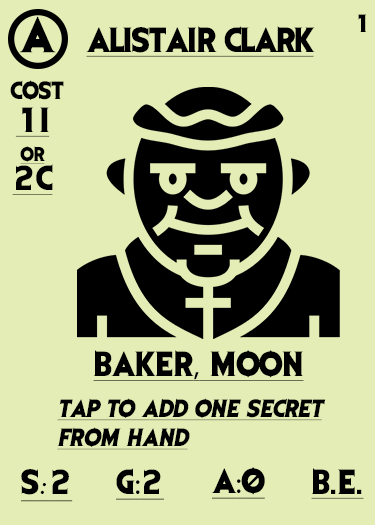
<style>
.page{position:relative;width:375px;height:525px;background:#e3edb5}
.page>*{position:absolute;margin:0}
.t1{font:41.7px "EvilDead";letter-spacing:-0.05em;color:#000000}
.t2{font:20.8px "EvilDead";color:#000000}
.t3{font:29.2px "EvilDead";letter-spacing:-0.025em;color:#000000;text-decoration:underline}
.t4{font:29.2px/29.2px "EvilDead";color:#000000;text-decoration:underline}
.t5{font:16.7px/29.2px "EvilDead";color:#000000;text-decoration:underline}
.t6{font:29.2px "EvilDead";color:#000000;text-decoration:underline}
.t7{font:29.2px "MyriadPro-Regular";color:#000000;text-decoration:underline}
.t8{font:20.8px/29.2px "EvilDead";color:#000000;font-style:italic;text-decoration:underline}
.t9{font:29.2px "Fadli-Script";color:#000000;text-decoration:underline}
</style>
<div class="page">
<p class="t1" style="left:19px;top:16px;width:37px;height:37px">A</p>
<p class="t2" style="left:358px;top:14px;width:9px;height:18px">1</p>
<p class="t3" style="left:86px;top:26px;width:229px;height:31px">Alistair Clark</p>
<p class="t2" style="left:10px;top:80px;width:54px;height:20px">COST</p>
<p class="t4" style="left:12px;top:107px;width:41px;height:88px;text-align:center">1I<br><span class="t5">or<br></span>2C</p>
<p class="t6" style="left:93px;top:350px;width:211px;height:31px">BAKER<span class="t7">,</span> MOON</p>
<p class="t8" style="left:57px;top:398px;width:269px;height:52px">Tap to add one secret<br>FROM HAND</p>
<p class="t6" style="left:21px;top:469px;width:52px;height:33px">S<span class="t9">:</span>2</p>
<p class="t6" style="left:116px;top:468px;width:49px;height:32px">G<span class="t7">:</span>2</p>
<p class="t6" style="left:211px;top:467px;width:54px;height:32px">A<span class="t7">:</span>0</p>
<p class="t6" style="left:311px;top:468px;width:53px;height:31px">B.E.</p>
</div>
